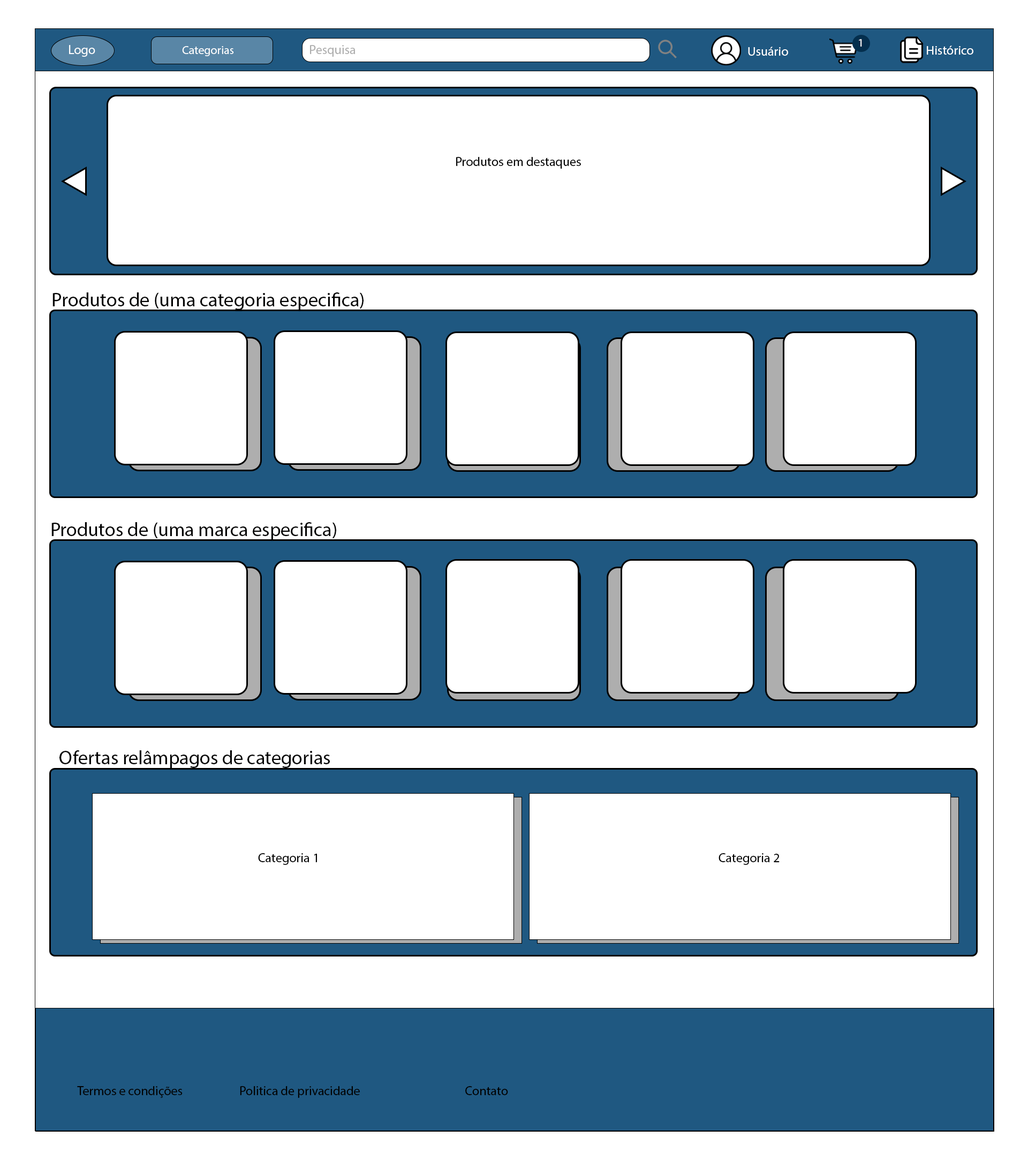
<style>
.page{position:relative;width:1028px;height:1160px;background:#ffffff}
.page>*{position:absolute;margin:0}
.t1{font:11px "MyriadPro-Regular";color:#ffffff;scale:1.05 1}
.t2{font:12.9px "MyriadPro-Regular";color:#ffffff}
.t3{font:11.7px "MyriadPro-Regular";color:#ffffff}
.t4{font:12.8px "MyriadPro-Regular";color:#aeaeae}
.t5{font:12.7px "MyriadPro-Regular";color:#ffffff}
.t6{font:12.9px "MyriadPro-Regular";color:#000000}
.t7{font:19.3px "MyriadPro-Regular";color:#000000}
</style>
<div class="page">
<p class="t1" style="left:859px;top:39px;width:3px;height:8px">1</p>
<p class="t2" style="left:69px;top:45px;width:26px;height:12px">Logo</p>
<p class="t3" style="left:182px;top:46px;width:52px;height:10px">Categorias</p>
<p class="t4" style="left:310px;top:45px;width:46px;height:12px">Pesquisa</p>
<p class="t5" style="left:748px;top:47px;width:40px;height:9px">Usuário</p>
<p class="t5" style="left:927px;top:46px;width:46px;height:9px">Histórico</p>
<p class="t6" style="left:456px;top:157px;width:125px;height:12px">Produtos em destaques</p>
<p class="t7" style="left:52px;top:292px;width:312px;height:18px">Produtos de (uma categoria especifica)</p>
<p class="t7" style="left:51px;top:522px;width:285px;height:18px">Produtos de (uma marca especifica)</p>
<p class="t7" style="left:59px;top:750px;width:271px;height:18px">Ofertas relâmpagos de categorias</p>
<p class="t6" style="left:258px;top:853px;width:59px;height:12px">Categoria 1</p>
<p class="t6" style="left:719px;top:853px;width:61px;height:12px">Categoria 2</p>
<p class="t6" style="left:77px;top:1086px;width:106px;height:12px">Termos e condições</p>
<p class="t6" style="left:240px;top:1086px;width:120px;height:12px">Politica de privacidade</p>
<p class="t6" style="left:465px;top:1086px;width:43px;height:9px">Contato</p>
</div>
